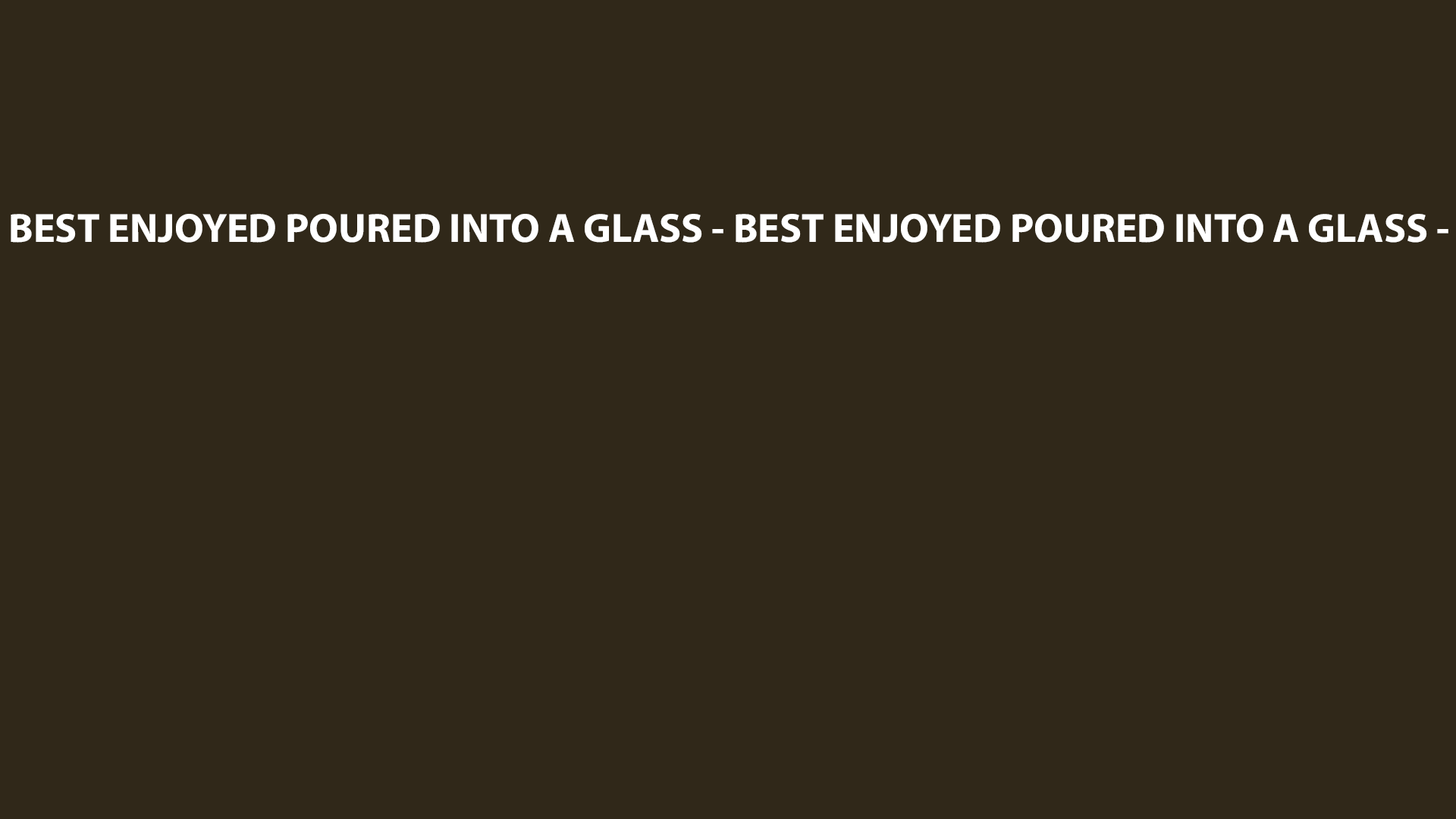
<style>
.page{position:relative;width:1456px;height:819px;background:#302819}
.page>*{position:absolute;margin:0}
.t1{font:40.9px "MyriadConceptRoman-Bold";color:#ffffff;font-weight:bold;font-style:italic}
</style>
<div class="page">
<p class="t1" style="left:11px;top:214px;width:1437px;height:29px">BEST ENJOYED POURED INTO A GLASS - BEST ENJOYED POURED INTO A GLASS -</p>
</div>
